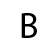
<style>
.page{position:relative;width:50px;height:50px;background:#ffffff}
.page>*{position:absolute;margin:0}
.t1{font:36px "MyriadPro-Regular";color:#000000}
</style>
<div class="page">
<p class="t1" style="left:21px;top:13px;width:16px;height:25px">B</p>
</div>
